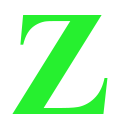
<style>
.page{position:relative;width:132px;height:133px;background:#ffffff}
.page>*{position:absolute;margin:0}
.t1{font:150px "TimesNewRomanPS-BoldMT";color:#26f02f}
</style>
<div class="page">
<p class="t1" style="left:12px;top:15px;width:96px;height:99px">Z</p>
</div>
